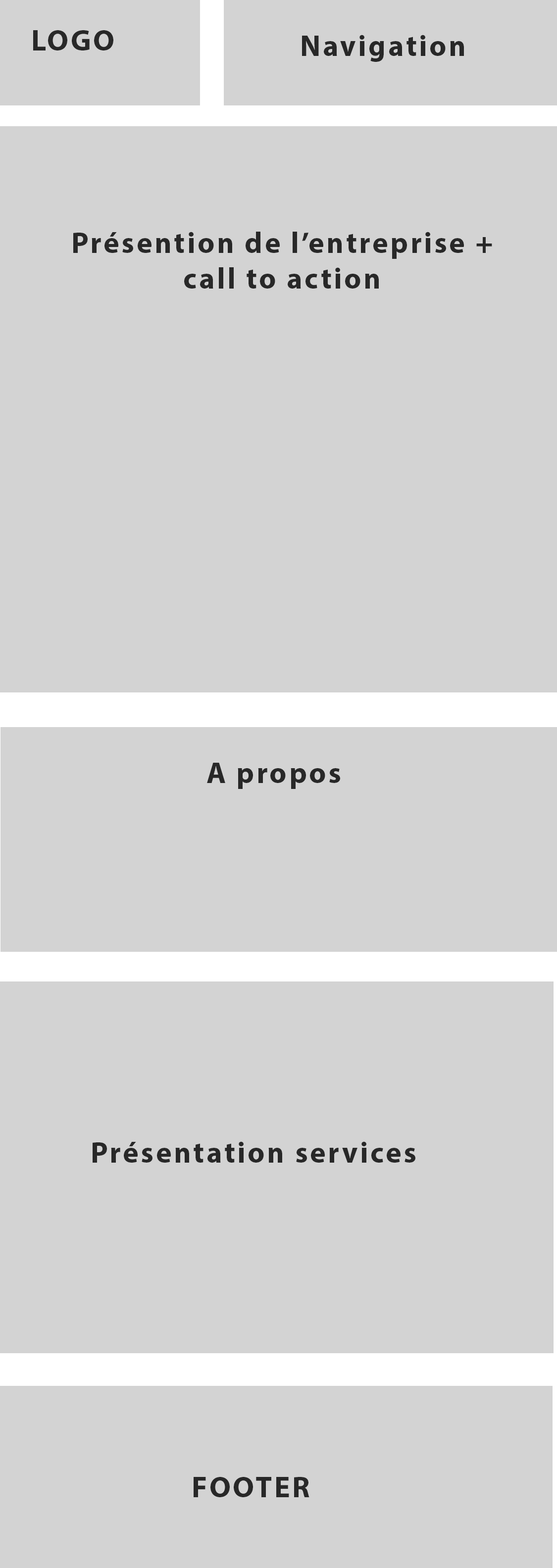
<style>
.page{position:relative;width:557px;height:1568px;background:#d3d3d3}
.page>*{position:absolute;margin:0}
.t1{font:29.7px "MyriadPro-Bold";letter-spacing:0.075em;color:#282828}
</style>
<div class="page">
<p class="t1" style="left:33px;top:30px;width:80px;height:20px">LOGO</p>
<p class="t1" style="left:302px;top:35px;width:162px;height:27px">Navigation</p>
<p class="t1" style="left:73px;top:232px;width:419px;height:57px;text-align:center">Présention de l’entreprise + call to action</p>
<p class="t1" style="left:207px;top:763px;width:133px;height:26px">A propos</p>
<p class="t1" style="left:93px;top:1141px;width:322px;height:22px">Présentation services</p>
<p class="t1" style="left:194px;top:1477px;width:115px;height:20px">FOOTER</p>
</div>
